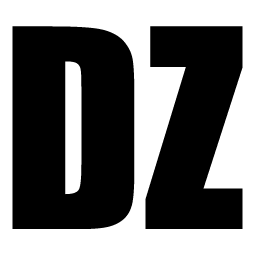
<style>
.page{position:relative;width:256px;height:256px;background:#000000}
.page>*{position:absolute;margin:0}
.t1{font:256px "Impact";color:#000000}
</style>
<div class="page">
<p class="t1" style="left:12px;top:26px;width:231px;height:203px">DZ</p>
</div>
